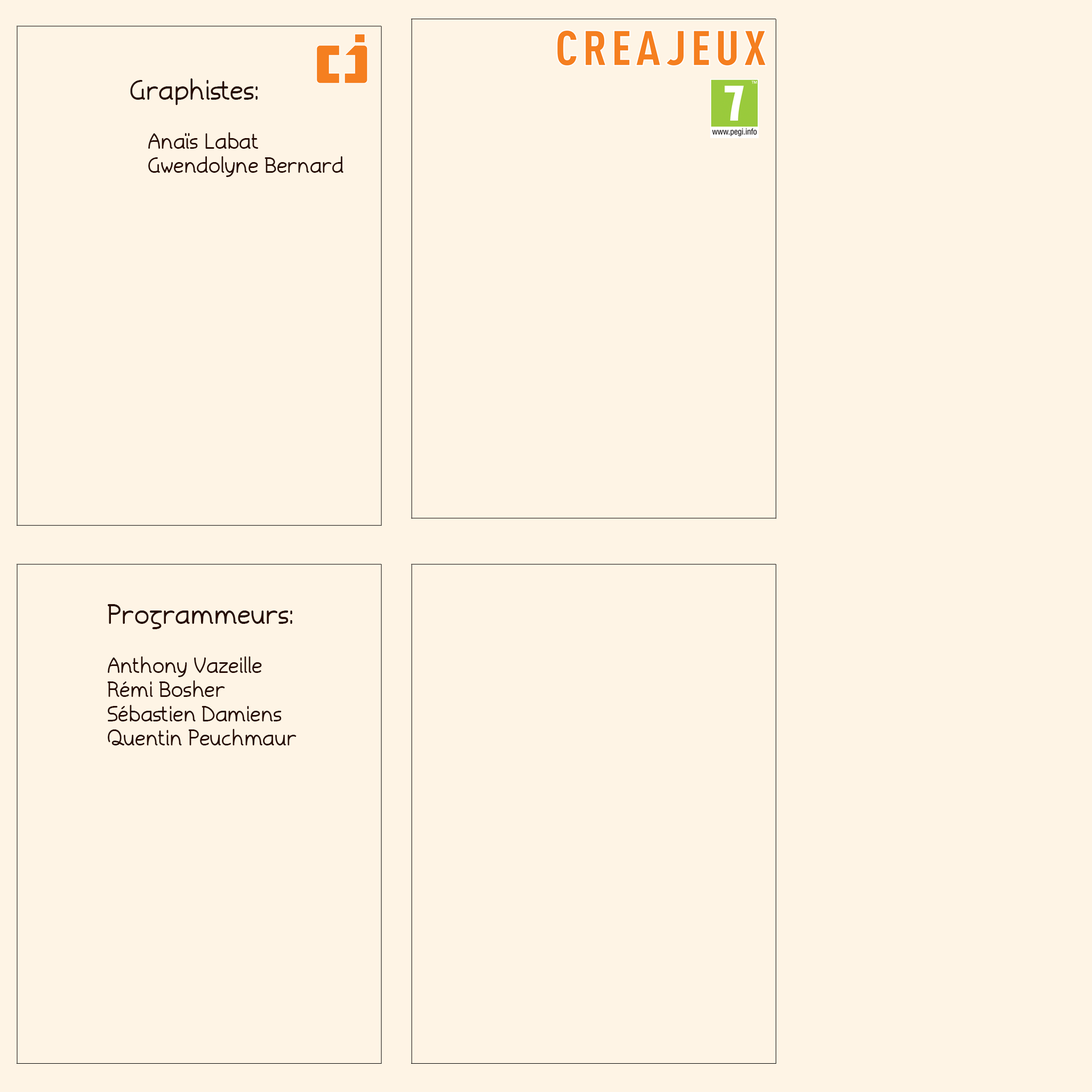
<style>
.page{position:relative;width:1092px;height:1092px;background:#fef4e5}
.page>*{position:absolute;margin:0}
.t1{font:20.3px "Torid";color:#260c04}
.t2{font:25.6px "Torid";color:#260c04}
</style>
<div class="page">
<p class="t1" style="left:130px;top:78px;width:213px;height:99px"><span class="t2">Graphistes:<br></span><br>   Anaïs Labat<br>   Gwendolyne Bernard</p>
<p class="t1" style="left:107px;top:604px;width:189px;height:141px"><span class="t2">Programmeurs:<br></span><br>Anthony Vazeille<br>Rémi Bosher<br>Sébastien Damiens<br>Quentin Peuchmaur</p>
</div>
